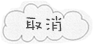
<style>
.page{position:relative;width:93px;height:44px}
.page>*{position:absolute;margin:0}
.t1{font:20.2px "DFPWaWaW5";letter-spacing:-0.025em;color:#4e4e4e}
</style>
<div class="page">
<p class="t1" style="left:26px;top:16px;width:36px;height:16px">取消</p>
</div>
